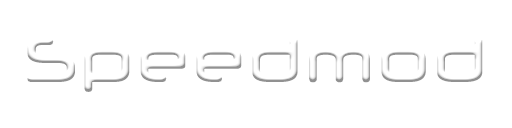
<style>
.page{position:relative;width:512px;height:128px;background:#ffffff}
.page>*{position:absolute;margin:0}
.t1{font:60px "NeuropolXFree";font-weight:bold}
</style>
<div class="page">
<p class="t1" style="left:27px;top:37px;width:456px;height:55px">Speedmod</p>
</div>
